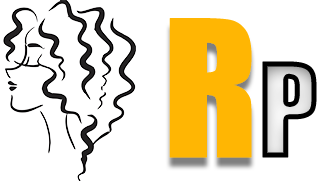
<style>
.page{position:relative;width:320px;height:181px;background:#ffffff}
.page>*{position:absolute;margin:0}
.t1{font:175.3px "Impact";color:#ffb603;font-weight:bold}
.t2{font:120.2px "Impact";font-weight:bold}
</style>
<div class="page">
<p class="t1" style="left:169px;top:18px;width:83px;height:140px">R</p>
<p class="t2" style="left:262px;top:61px;width:55px;height:97px">P</p>
</div>
